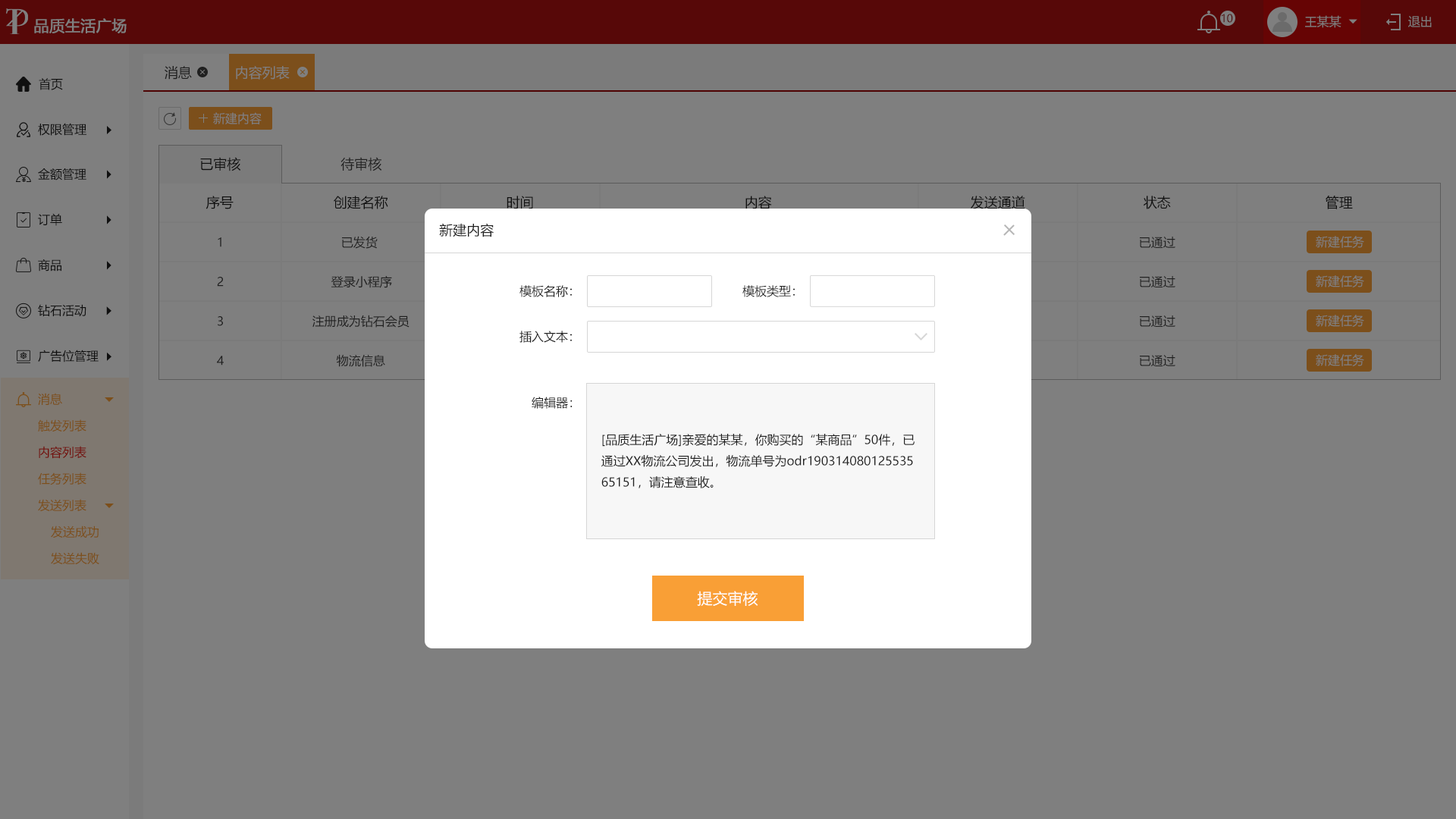
<style>
.page{position:relative;width:1456px;height:819px;background:#7f7f7f}
.page>*{position:absolute;margin:0}
.t1{font:10.6px "MicrosoftYaHei";color:#4e0303;text-transform:uppercase}
.t2{font:12.1px "MicrosoftYaHei";color:#7f7f7f;text-transform:uppercase}
.t3{font:15.2px "MicrosoftYaHei";color:#7f7f7f;text-transform:uppercase;font-weight:bold}
.t4{font:13.6px "MicrosoftYaHei";color:#202020;text-transform:uppercase}
.t5{font:13.6px "MicrosoftYaHei";color:#7f7f7f;text-transform:uppercase}
.t6{font:12.1px "MicrosoftYaHei";color:#202020;text-transform:uppercase}
.t7{font:12.1px "MicrosoftYaHei";color:#7c4f1b;text-transform:uppercase}
.t8{font:12.1px "MicrosoftYaHei";color:#202020}
.t9{font:12.1px "MicrosoftYaHei";color:#730f0c;text-transform:uppercase}
.t10{font:15.2px "MicrosoftYaHei";color:#ffffff}
</style>
<div class="page">
<p class="t1" style="left:1222px;top:14px;width:11px;height:9px">10</p>
<p class="t2" style="left:1305px;top:15px;width:36px;height:13px">王某某</p>
<p class="t2" style="left:1408px;top:16px;width:24px;height:11px">退出</p>
<p class="t3" style="left:34px;top:18px;width:93px;height:15px">品质生活广场</p>
<p class="t4" style="left:165px;top:66px;width:27px;height:14px">消息</p>
<p class="t5" style="left:236px;top:66px;width:54px;height:14px">内容列表</p>
<p class="t6" style="left:39px;top:78px;width:24px;height:12px">首页</p>
<p class="t2" style="left:213px;top:112px;width:49px;height:12px">新建内容</p>
<p class="t6" style="left:38px;top:123px;width:48px;height:13px">权限管理</p>
<p class="t4" style="left:200px;top:157px;width:41px;height:14px">已审核</p>
<p class="t4" style="left:340px;top:157px;width:42px;height:14px">待审核</p>
<p class="t6" style="left:38px;top:168px;width:48px;height:12px">金额管理</p>
<p class="t4" style="left:206px;top:196px;width:28px;height:13px">序号</p>
<p class="t4" style="left:334px;top:196px;width:54px;height:13px">创建名称</p>
<p class="t4" style="left:507px;top:196px;width:26px;height:13px">时间</p>
<p class="t4" style="left:745px;top:196px;width:27px;height:13px">内容</p>
<p class="t4" style="left:971px;top:196px;width:54px;height:13px">发送通道</p>
<p class="t4" style="left:1143px;top:196px;width:28px;height:13px">状态</p>
<p class="t4" style="left:1326px;top:196px;width:27px;height:13px">管理</p>
<p class="t6" style="left:38px;top:213px;width:24px;height:13px">订单</p>
<p class="t4" style="left:439px;top:223px;width:55px;height:14px">新建内容</p>
<p class="t6" style="left:218px;top:237px;width:3px;height:10px">1</p>
<p class="t6" style="left:342px;top:236px;width:36px;height:13px">已发货</p>
<p class="t6" style="left:1140px;top:237px;width:35px;height:12px">已通过</p>
<p class="t2" style="left:1316px;top:236px;width:48px;height:12px">新建任务</p>
<p class="t6" style="left:38px;top:259px;width:23px;height:12px">商品</p>
<p class="t6" style="left:217px;top:277px;width:7px;height:10px">2</p>
<p class="t6" style="left:331px;top:275px;width:61px;height:13px">登录小程序</p>
<p class="t6" style="left:1140px;top:276px;width:35px;height:12px">已通过</p>
<p class="t2" style="left:1316px;top:275px;width:48px;height:12px">新建任务</p>
<p class="t6" style="left:519px;top:285px;width:53px;height:12px">模板名称：</p>
<p class="t6" style="left:742px;top:285px;width:53px;height:12px">模板类型：</p>
<p class="t6" style="left:38px;top:304px;width:48px;height:12px">钻石活动</p>
<p class="t6" style="left:218px;top:316px;width:5px;height:10px">3</p>
<p class="t6" style="left:312px;top:315px;width:97px;height:13px">注册成为钻石会员</p>
<p class="t6" style="left:1140px;top:315px;width:35px;height:13px">已通过</p>
<p class="t2" style="left:1316px;top:315px;width:48px;height:12px">新建任务</p>
<p class="t6" style="left:519px;top:331px;width:53px;height:12px">插入文本：</p>
<p class="t6" style="left:38px;top:350px;width:61px;height:12px">广告位管理</p>
<p class="t6" style="left:217px;top:356px;width:7px;height:10px">4</p>
<p class="t6" style="left:336px;top:354px;width:49px;height:13px">物流信息</p>
<p class="t6" style="left:1140px;top:355px;width:35px;height:12px">已通过</p>
<p class="t2" style="left:1316px;top:354px;width:48px;height:12px">新建任务</p>
<p class="t7" style="left:38px;top:393px;width:24px;height:12px">消息</p>
<p class="t8" style="left:532px;top:397px;width:41px;height:12px">编辑器：</p>
<p class="t7" style="left:38px;top:419px;width:48px;height:12px">触发列表</p>
<p class="t6" style="left:601px;top:434px;width:314px;height:54px">[品质生活广场]亲爱的某某，你购买的“某商品”50件，已<br>通过xx物流公司发出，物流单号为<span class="t8">odr190314080125535<br>65151，请注意查收。</span></p>
<p class="t9" style="left:39px;top:446px;width:47px;height:13px">内容列表</p>
<p class="t7" style="left:38px;top:472px;width:48px;height:13px">任务列表</p>
<p class="t7" style="left:38px;top:499px;width:48px;height:12px">发送列表</p>
<p class="t7" style="left:51px;top:526px;width:48px;height:12px">发送成功</p>
<p class="t7" style="left:51px;top:552px;width:48px;height:13px">发送失败</p>
<p class="t10" style="left:697px;top:591px;width:61px;height:15px">提交审核</p>
</div>
